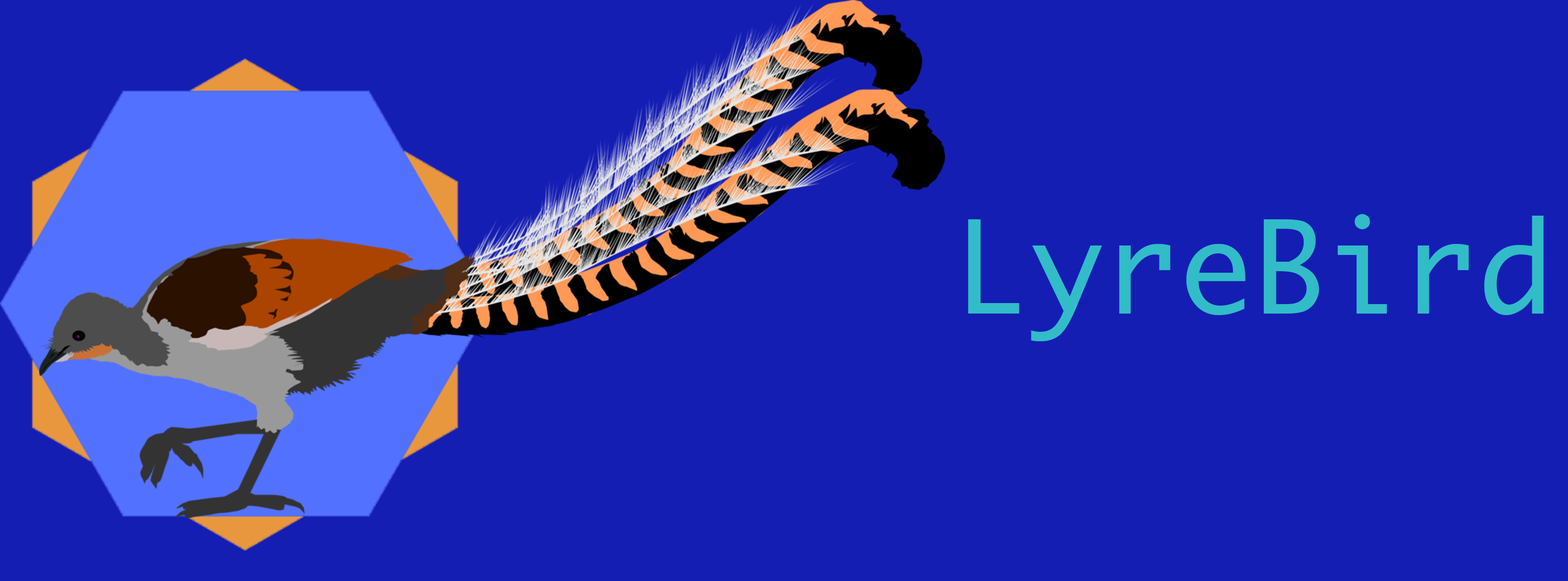
<style>
.page{position:relative;width:1568px;height:581px;background:#151eb3}
.page>*{position:absolute;margin:0}
.t1{font:124.3px "Monaco";color:#31bcc8}
</style>
<div class="page">
<p class="t1" style="left:968px;top:214px;width:576px;height:127px">LyreBird</p>
</div>
